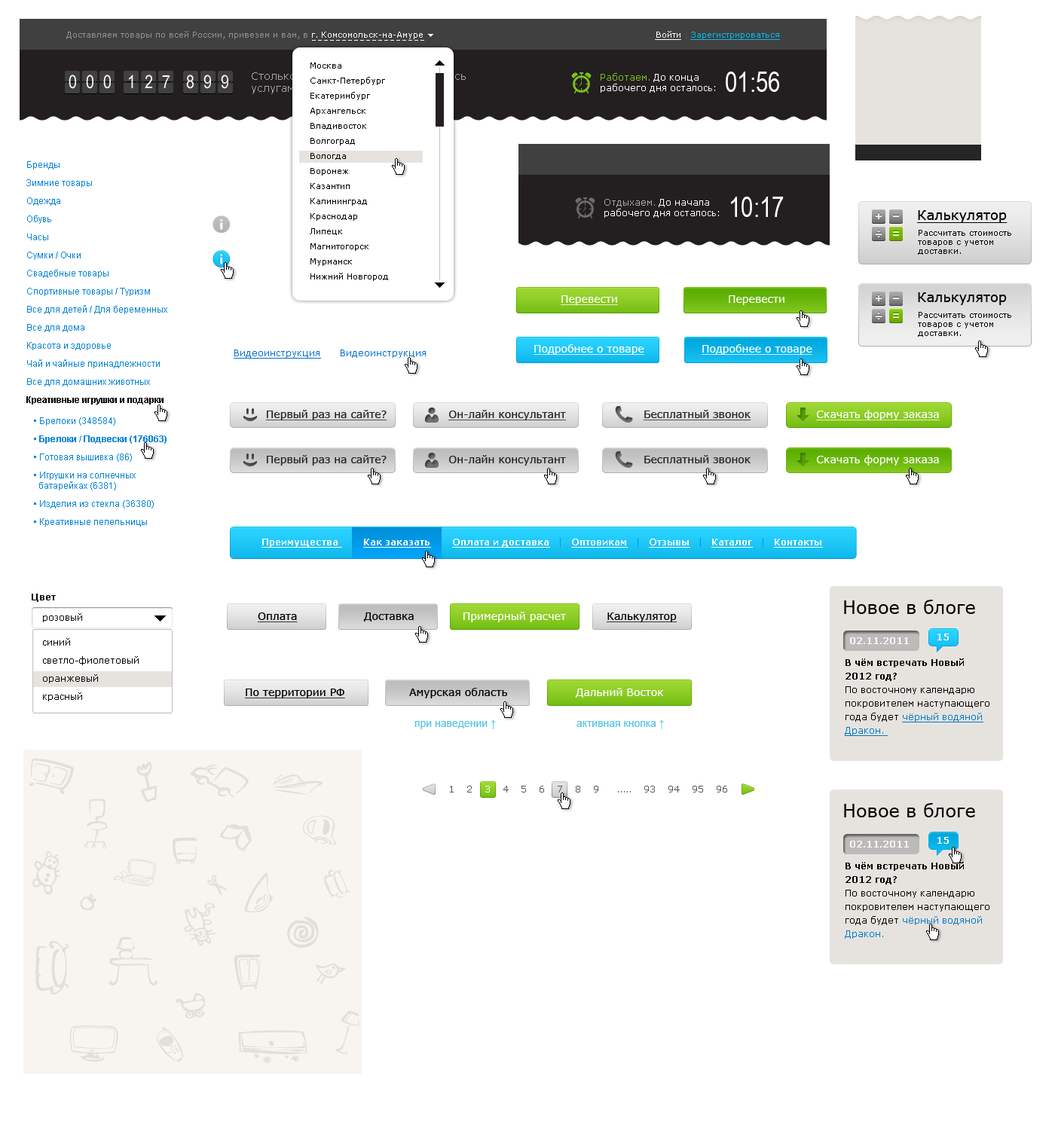
<style>
.page{position:relative;width:1055px;height:1130px;background:#ffffff}
.page>*{position:absolute;margin:0}
.t1{font:8.3px "Verdana";color:#929292}
.t2{font:8.3px "Verdana";color:#ffffff}
.t3{font:8.3px "Verdana";color:#00bdef;text-decoration:underline}
.t4{font:8.3px "Verdana";color:#ffffff;text-decoration:underline}
.t5{font:8.3px "Verdana";color:#51474a}
.t6{font:8.3px/15.1px "Verdana";color:#000000}
.t7{font:18.1px "ArialNarrow";letter-spacing:0.5em;color:#ffffff}
.t8{font:9px/10.5px "Verdana";color:#ffffff}
.t9{font:9px/10.5px "Verdana";color:#7bc219}
.t10{font:27.1px "ArialNarrow";color:#ffffff}
.t11{font:9px/18.1px "ArialMT";color:#0383d5}
.t12{font:9px/18.1px "Arial-BoldMT";color:#000000}
.t13{font:9px/10.5px "Verdana";color:#a9a7a8}
.t14{font:13.6px "Verdana";color:#000000;text-decoration:underline}
.t15{font:8.3px/9px "Verdana";color:#000000}
.t16{font:13.6px "Verdana";color:#000000}
.t17{font:10.5px "Verdana";color:#ffffff;text-decoration:underline}
.t18{font:10.5px "Verdana";color:#ffffff}
.t19{font:9px "Verdana";color:#006dca;text-decoration:underline}
.t20{font:9px "Verdana";color:#006dca}
.t21{font:10.5px "Verdana";color:#231f20;text-decoration:underline}
.t22{font:9px/18.1px "Arial-BoldMT";color:#0383d5}
.t23{font:9px/10.5px "ArialMT";color:#0383d5}
.t24{font:10.5px "Verdana";color:#231f20}
.t25{font:9px "Verdana-Bold";color:#ffffff;text-decoration:underline}
.t26{font:9px "Verdana-Bold";color:#ffffff}
.t27{font:9px "Verdana";color:#0099e7}
.t28{font:9px "Verdana";color:#0396e9}
.t29{font:9px "Verdana-Bold";color:#000000}
.t30{font:18.1px "Verdana";color:#000000}
.t31{font:9px "Verdana";color:#000000}
.t32{font:10.5px "Verdana";color:#000000;text-decoration:underline}
.t33{font:10.5px "Verdana";color:#000000}
.t34{font:9px/18.1px "Verdana";color:#000000}
.t35{font:9px/13.6px "Verdana";color:#000000}
.t36{font:9px/13.6px "Verdana-Bold";color:#000000}
.t37{font:9px/13.6px "Verdana";color:#0078cb;text-decoration:underline}
.t38{font:10.5px "ArialMT";color:#59c5e2}
.t39{font:8.7px "Verdana";letter-spacing:0.5em;color:#555555;scale:1.04 1}
.t40{font:8.7px "Verdana";letter-spacing:0.5em;color:#ffffff;scale:1.04 1}
.t41{font:8.7px "Verdana";color:#555555;scale:1.04 1}
.t42{font:9px/13.6px "Verdana";color:#0078cb}
</style>
<div class="page">
<p class="t1" style="left:66px;top:31px;width:357px;height:8px">Доставляем товары по всей России, привезем и вам, в <span class="t2">г. Комсомольск-на-Амуре</span></p>
<p class="t3" style="left:655px;top:31px;width:125px;height:9px"><span class="t4">Войти </span><span class="t5">| </span>Зарегистрироваться</p>
<p class="t6" style="left:310px;top:63px;width:78px;height:218px">Москва<br>    Санкт-Петербург<br>    Екатеринбург<br>    Архангельск<br>    Владивосток<br>    Волгоград<br>    Вологда<br>    Воронеж<br>    Казантип<br>    Калининград<br>    Краснодар<br>    Липецк<br>    Магнитогорск<br>    Мурманск<br>    Нижний Новгород</p>
<p class="t7" style="left:69px;top:75px;width:42px;height:14px">000</p>
<p class="t7" style="left:129px;top:75px;width:41px;height:13px">127</p>
<p class="t7" style="left:186px;top:75px;width:42px;height:14px">899</p>
<p class="t8" style="left:601px;top:73px;width:114px;height:20px"><span class="t9">Работаем. </span>До конца <br>рабочего дня осталось:</p>
<p class="t10" style="left:726px;top:72px;width:53px;height:20px">01:56</p>
<p class="t11" style="left:26px;top:161px;width:141px;height:244px">Бренды<br>Зимние товары <br>Одежда <br>Обувь <br>Часы<br>Cумки / Очки<br>Свадебные товары<br>Cпортивные товары / Туризм<br>Все для детей / Для беременных <br>Все для дома<br>Красота и здоровье<br>Чай и чайные принадлежности <br>Все для домашних животных <br><span class="t12">Креативные игрушки и подарки</span></p>
<p class="t10" style="left:731px;top:197px;width:53px;height:20px">10:17</p>
<p class="t8" style="left:604px;top:199px;width:115px;height:19px"><span class="t13"><br>Отдыхаем. </span>До начала<br>рабочего дня осталось:</p>
<p class="t14" style="left:917px;top:210px;width:90px;height:13px">Калькулятор</p>
<p class="t15" style="left:918px;top:230px;width:93px;height:25px">Рассчитать стоимость<br>товаров с учетом <br>доставки.</p>
<p class="t16" style="left:918px;top:292px;width:89px;height:13px">Калькулятор</p>
<p class="t17" style="left:561px;top:295px;width:57px;height:10px">Перевести</p>
<p class="t18" style="left:729px;top:295px;width:55px;height:10px">Перевести</p>
<p class="t15" style="left:918px;top:312px;width:93px;height:25px">Рассчитать стоимость<br>товаров с учетом <br>доставки.</p>
<p class="t19" style="left:234px;top:350px;width:87px;height:9px">Видеоинструкция</p>
<p class="t20" style="left:341px;top:350px;width:85px;height:8px">Видеоинструкция</p>
<p class="t17" style="left:534px;top:344px;width:110px;height:11px">Подробнее о товаре</p>
<p class="t17" style="left:702px;top:344px;width:110px;height:11px">Подробнее о товаре</p>
<p class="t21" style="left:265px;top:410px;width:122px;height:10px">Первый раз на сайте?</p>
<p class="t21" style="left:448px;top:410px;width:118px;height:10px">Он-лайн консультант</p>
<p class="t21" style="left:643px;top:410px;width:108px;height:10px">Бесплатный звонок</p>
<p class="t17" style="left:816px;top:410px;width:124px;height:10px">Скачать форму заказа</p>
<p class="t11" style="left:34px;top:417px;width:133px;height:110px">• Брелоки (348584)<br>  <span class="t22">  • Брелоки / Подвески (176063)<br> </span>   • Готовая вышивка (86)<br>    • Игрушки на солнечных <br><span class="t23">      батарейках (6381)<br> </span>   • Изделия из стекла (36380)<br>    • Креативные пепельницы</p>
<p class="t24" style="left:267px;top:455px;width:120px;height:11px">Первый раз на сайте?</p>
<p class="t24" style="left:449px;top:455px;width:117px;height:11px">Он-лайн консультант</p>
<p class="t24" style="left:644px;top:455px;width:107px;height:8px">Бесплатный звонок</p>
<p class="t18" style="left:817px;top:455px;width:122px;height:11px">Скачать форму заказа</p>
<p class="t25" style="left:261px;top:538px;width:562px;height:10px"><span class="t26">   </span>Преимущества    <span class="t27">|   </span>Как заказать   <span class="t28">|   </span>Оплата и доставка   <span class="t27">|   </span>Оптовикам   <span class="t27">|   </span>Отзывы   <span class="t27">|   </span>Каталог   <span class="t27">|   </span>Контакты</p>
<p class="t29" style="left:32px;top:594px;width:24px;height:8px">Цвет</p>
<p class="t30" style="left:844px;top:600px;width:131px;height:14px">Новое в блоге</p>
<p class="t31" style="left:43px;top:613px;width:39px;height:9px">розовый</p>
<p class="t18" style="left:258px;top:612px;width:419px;height:10px"><span class="t32">Оплата</span><span class="t33">                  Доставка            </span> Примерный расчет           <span class="t32">Калькулятор</span></p>
<p class="t34" style="left:43px;top:638px;width:96px;height:64px">синий<br>светло-фиолетовый<br>оранжевый<br>красный</p>
<p class="t26" style="left:850px;top:637px;width:59px;height:7px">02.11.2011</p>
<p class="t26" style="left:937px;top:634px;width:12px;height:7px">15</p>
<p class="t35" style="left:845px;top:659px;width:144px;height:77px"><span class="t36">В чём встречать Новый 2012 год?<br></span>По восточному календарю покровителем наступающего года будет <span class="t37">чёрный водяной Дракон.</span></p>
<p class="t32" style="left:245px;top:689px;width:100px;height:10px">По территории РФ</p>
<p class="t33" style="left:409px;top:688px;width:98px;height:11px">Амурская область</p>
<p class="t18" style="left:575px;top:688px;width:89px;height:10px">Дальний Восток</p>
<p class="t38" style="left:414px;top:720px;width:82px;height:9px">при наведении ↑</p>
<p class="t38" style="left:576px;top:720px;width:88px;height:9px">активная кнопка ↑</p>
<p class="t39" style="left:450px;top:786px;width:148px;height:7px">1 2 <span class="t40">3 </span>4 5 6 7 8 9</p>
<p class="t41" style="left:618px;top:786px;width:109px;height:7px">.....    93    94    95    96</p>
<p class="t30" style="left:844px;top:803px;width:131px;height:15px">Новое в блоге</p>
<p class="t26" style="left:850px;top:841px;width:59px;height:7px">02.11.2011</p>
<p class="t26" style="left:937px;top:837px;width:12px;height:7px">15</p>
<p class="t35" style="left:845px;top:862px;width:144px;height:77px"><span class="t36">В чём встречать Новый 2012 год?<br></span>По восточному календарю покровителем наступающего года будет <span class="t42">чёрный водяной Дракон.</span></p>
</div>
